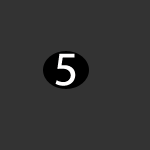
<style>
.page{position:relative;width:150px;height:150px;background:#333333}
.page>*{position:absolute;margin:0}
.t1{font:48px "MyriadPro-Regular";color:#fffefe}
</style>
<div class="page">
<p class="t1" style="left:55px;top:53px;width:21px;height:33px">5</p>
</div>
